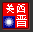
<style>
.page{position:relative;width:33px;height:32px;background:#f20000}
.page>*{position:absolute;margin:0}
.t1{font:10.4px "SimSun";color:#ffffff}
.t2{font:11.7px "SimSun";color:#ffffff}
</style>
<div class="page">
<p class="t1" style="left:6px;top:4px;width:19px;height:9px">美西</p>
<p class="t2" style="left:16px;top:15px;width:11px;height:12px">晋</p>
</div>
